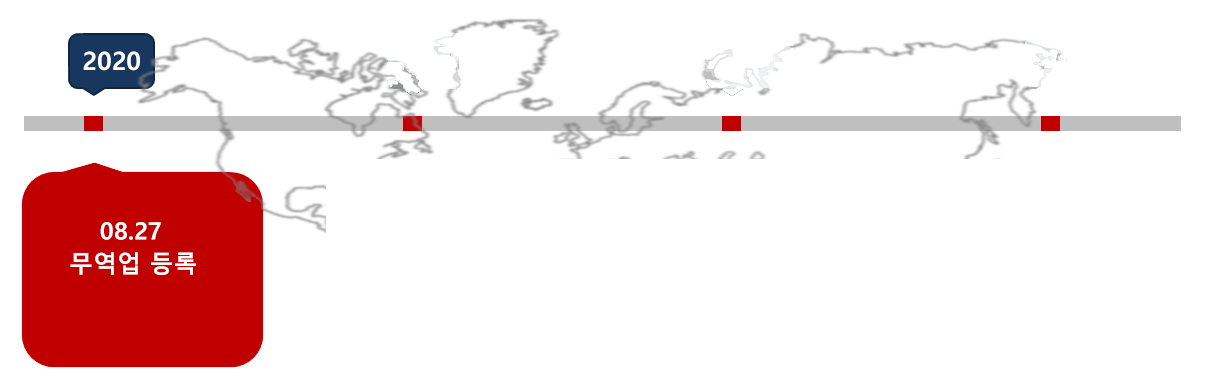
<style>
.page{position:relative;width:1224px;height:381px;background:#ffffff}
.page>*{position:absolute;margin:0}
.t1{font:25.3px "MalgunGothicBold";color:#ffffff}
.t2{font:24px "MalgunGothicBold";color:#ffffff}
</style>
<div class="page">
<p class="t1" style="left:83px;top:51px;width:57px;height:20px">2020</p>
<p class="t2" style="left:100px;top:222px;width:61px;height:18px">08.27</p>
<p class="t2" style="left:70px;top:252px;width:126px;height:23px">무역업 등록</p>
</div>
